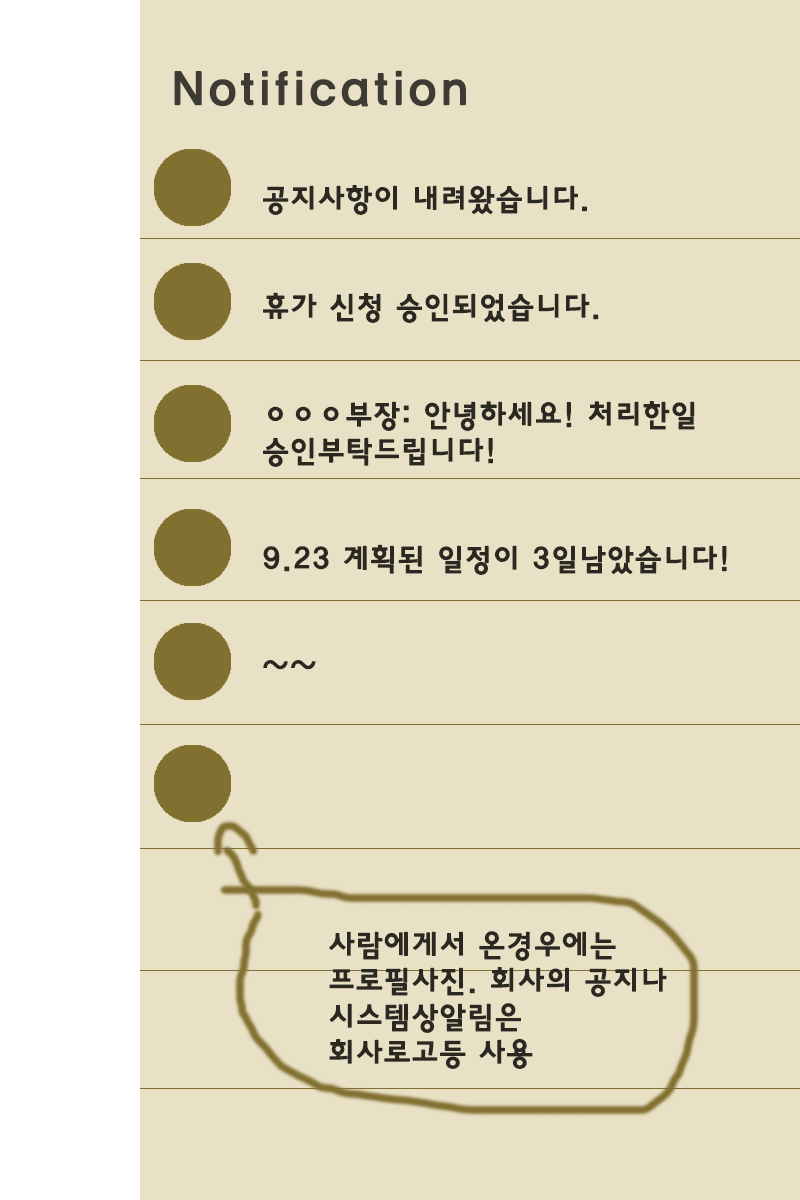
<style>
.page{position:relative;width:800px;height:1200px;background:#e9e1c6}
.page>*{position:absolute;margin:0}
.t1{font:48px "HaanYGodic23";color:#3d3b33;font-weight:bold}
.t2{font:30px "HaanYGodic23";color:#2a2820;font-weight:bold}
</style>
<div class="page">
<p class="t1" style="left:174px;top:70px;width:292px;height:37px">Notification</p>
<p class="t2" style="left:263px;top:185px;width:464px;height:485px">공지사항이 내려왔습니다.<br><br><br>휴가 신청 승인되었습니다.<br><br><br>ㅇㅇㅇ부장: 안녕하세요! 처리한일<br>승인부탁드립니다! <br><br><br>9.23 계획된 일정이 3일남았습니다!<br><br><br>~~</p>
<p class="t2" style="left:329px;top:931px;width:338px;height:138px">사람에게서 온경우에는<br>프로필사진. 회사의 공지나<br>시스템상알림은<br>회사로고등 사용</p>
</div>
